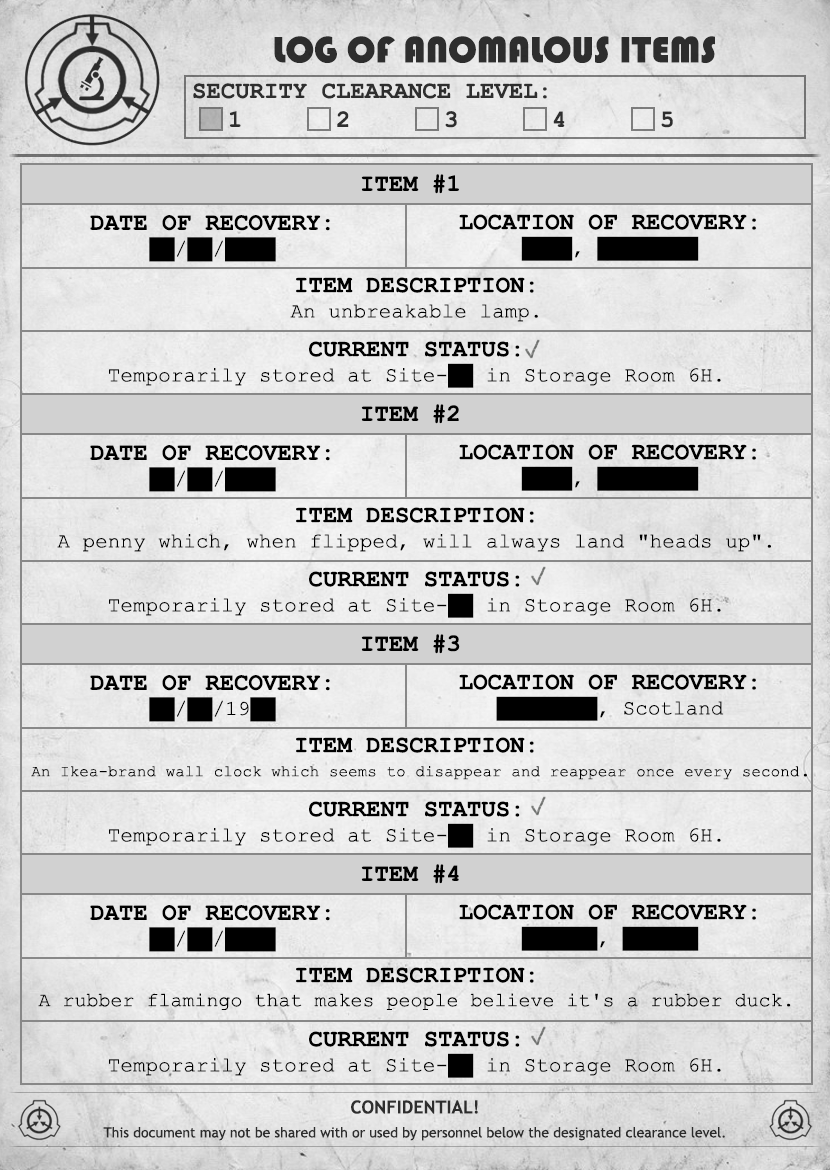
<style>
.page{position:relative;width:830px;height:1170px}
.page>*{position:absolute;margin:0}
.t1{font:38px "Bauhaus93";color:#333333}
.t2{font:24px "CourierNewPS-BoldMT";color:#333333;text-transform:uppercase}
.t3{font:24px "CourierNewPS-BoldMT";color:#333333}
.t4{font:24px "CourierNewPS-BoldMT";color:#000000;text-transform:uppercase}
.t5{font:21px "CourierNewPSMT";color:#000000}
.t6{font:16px "CourierNewPSMT";color:#000000}
.t7{font:20px "CourierNewPS-BoldMT";color:#000000;text-transform:uppercase}
.t8{font:20px "CourierNewPSMT";color:#000000}
.t9{font:14px/24px "TrebuchetMS";color:#333333}
.t10{font:18px/24px "TrebuchetMS-Bold";color:#333333}
</style>
<div class="page">
<p class="t1" style="left:274px;top:36px;width:441px;height:27px">LOG OF ANOMALOUS ITEMS</p>
<p class="t2" style="left:193px;top:83px;width:480px;height:45px"><span class="t3"><br></span>Security CLEARANCE LEVEL:<span class="t3"> <br> 1   2   3   4   5</span></p>
<p class="t4" style="left:361px;top:174px;width:98px;height:20px">Item #1</p>
<p class="t4" style="left:90px;top:215px;width:240px;height:47px;text-align:justify">Date of Recovery:<br><span class="t5">██/██/████</span></p>
<p class="t4" style="left:459px;top:214px;width:297px;height:47px;text-align:justify">Location of Recovery:<br><span class="t5">████, ████████</span></p>
<p class="t5" style="left:290px;top:277px;width:248px;height:45px;text-align:justify"><span class="t4">Item Description: <br></span>An unbreakable lamp.</p>
<p class="t5" style="left:109px;top:341px;width:612px;height:47px;text-align:justify"><span class="t4">Current Status: <br></span>Temporarily stored at Site-██ in Storage Room 6H.</p>
<p class="t4" style="left:361px;top:404px;width:98px;height:20px">Item #2</p>
<p class="t4" style="left:90px;top:445px;width:240px;height:47px;text-align:justify">Date of Recovery:<br><span class="t5">██/██/████</span></p>
<p class="t4" style="left:459px;top:444px;width:297px;height:47px;text-align:justify">Location of Recovery:<br><span class="t5">████, ████████</span></p>
<p class="t5" style="left:57px;top:507px;width:714px;height:45px;text-align:justify"><span class="t4">Item Description: <br></span>A penny which, when flipped, will always land "heads up".</p>
<p class="t5" style="left:109px;top:571px;width:612px;height:47px;text-align:justify"><span class="t4">Current Status: <br></span>Temporarily stored at Site-██ in Storage Room 6H.</p>
<p class="t4" style="left:361px;top:634px;width:99px;height:20px">Item #3</p>
<p class="t4" style="left:90px;top:675px;width:240px;height:47px;text-align:justify">Date of Recovery:<br><span class="t5">██/██/19██</span></p>
<p class="t4" style="left:459px;top:674px;width:297px;height:47px;text-align:justify">Location of Recovery:<br><span class="t5">████████, Scotland</span></p>
<p class="t6" style="left:31px;top:737px;width:776px;height:43px;text-align:justify"><span class="t4">Item Description:<br></span> An Ikea-brand wall clock which seems to disappear and reappear once every second<span class="t7">.</span></p>
<p class="t5" style="left:109px;top:801px;width:612px;height:47px;text-align:justify"><span class="t4">Current Status: <br></span>Temporarily stored at Site-██ in Storage Room 6H.</p>
<p class="t4" style="left:361px;top:864px;width:98px;height:20px">Item #4</p>
<p class="t4" style="left:90px;top:905px;width:240px;height:47px;text-align:justify">Date of Recovery:<br><span class="t5">██/██/████</span></p>
<p class="t4" style="left:459px;top:904px;width:297px;height:47px;text-align:justify">Location of Recovery:<br><span class="t5">██████, ██████</span></p>
<p class="t8" style="left:38px;top:967px;width:753px;height:43px;text-align:justify"><span class="t4">Item Description: <br></span>A rubber flamingo that makes people believe it's a rubber duck.</p>
<p class="t5" style="left:109px;top:1031px;width:612px;height:47px;text-align:justify"><span class="t4">Current Status: <br></span>Temporarily stored at Site-██ in Storage Room 6H.</p>
<p class="t9" style="left:103px;top:1100px;width:622px;height:41px;text-align:center"><span class="t10">CONFIDENTIAL!<br></span>This document may not be shared with or used by personnel below the designated clearance level.</p>
</div>
